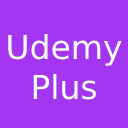
<style>
.page{position:relative;width:128px;height:128px;background:#a435f0}
.page>*{position:absolute;margin:0}
.t1{font:33px "DejaVuSans";color:#ffffff}
</style>
<div class="page">
<p class="t1" style="left:8px;top:33px;width:114px;height:67px;text-align:center">Udemy<br>Plus</p>
</div>
